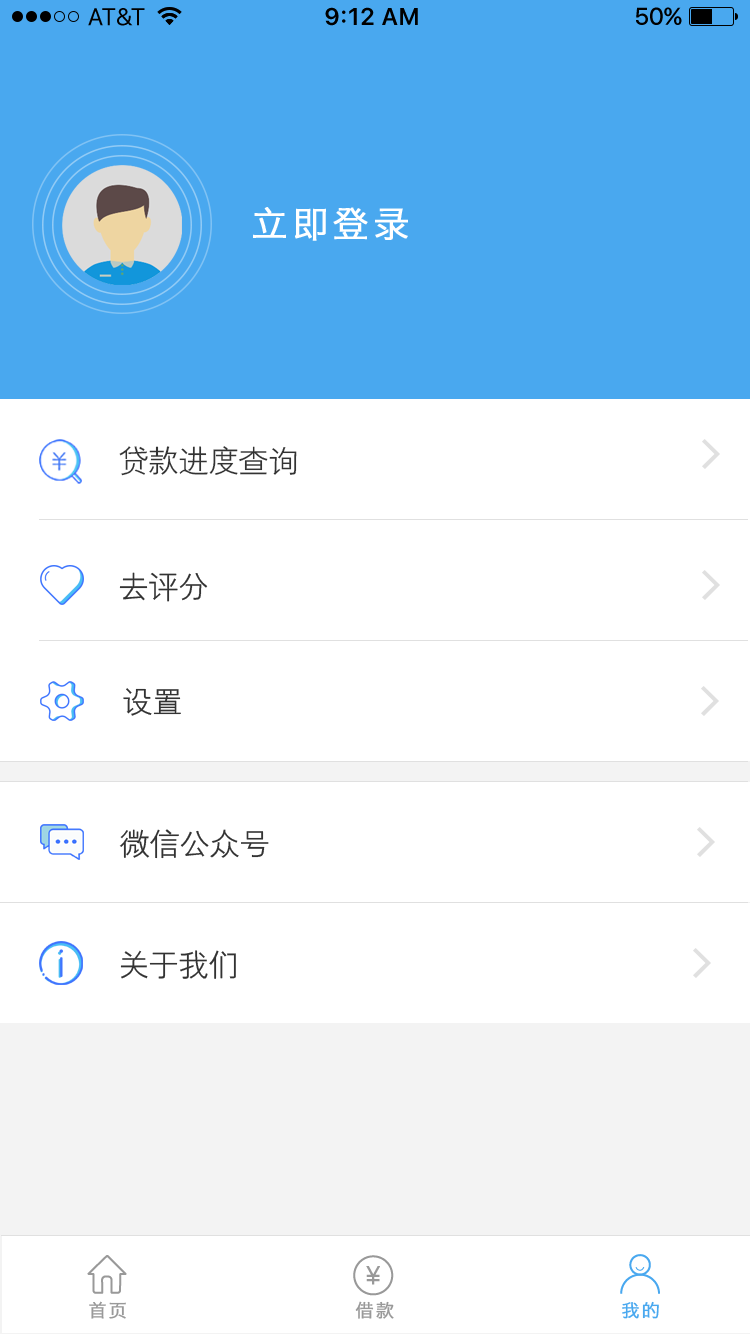
<style>
.page{position:relative;width:750px;height:1334px;background:#ffffff}
.page>*{position:absolute;margin:0}
.t1{font:36px "MingHei_R";letter-spacing:0.1em;color:#ffffff;font-weight:bold}
.t2{font:30px "HYZhongJianHeiJ";color:#333333}
.t3{font:18px "MingHei_R";letter-spacing:0.1em;color:#999999;font-weight:bold}
.t4{font:18px "MingHei_R";letter-spacing:0.1em;color:#49a8ef;font-weight:bold}
</style>
<div class="page">
<p class="t1" style="left:253px;top:207px;width:155px;height:34px">立即登录</p>
<p class="t2" style="left:119px;top:446px;width:178px;height:30px">贷款进度查询</p>
<p class="t2" style="left:119px;top:572px;width:89px;height:30px">去评分</p>
<p class="t2" style="left:123px;top:688px;width:58px;height:28px">设置</p>
<p class="t2" style="left:119px;top:829px;width:150px;height:30px">微信公众号</p>
<p class="t2" style="left:120px;top:950px;width:116px;height:29px">关于我们</p>
<p class="t3" style="left:89px;top:1301px;width:37px;height:18px">首页</p>
<p class="t3" style="left:355px;top:1301px;width:39px;height:18px">借款</p>
<p class="t4" style="left:622px;top:1301px;width:37px;height:18px">我的</p>
</div>
